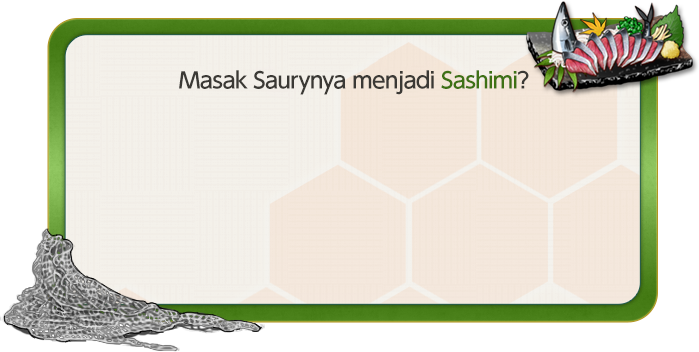
<style>
.page{position:relative;width:699px;height:352px;background:#ffffff}
.page>*{position:absolute;margin:0}
.t1{font:22px "UDShinGoPro-Medium";letter-spacing:-0.04em;color:#3b3935}
.t2{font:22px "UDShinGoPro-Medium";letter-spacing:-0.04em;color:#3e7115}
</style>
<div class="page">
<p class="t1" style="left:179px;top:70px;width:350px;height:25px">Masak Saurynya menjadi <span class="t2">Sashimi</span>?</p>
</div>
